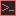
<style>
.page{position:relative;width:16px;height:16px;background:#222629}
.page>*{position:absolute;margin:0}
.t1{font:11.4px "Verdana-Bold";color:#fe605f}
</style>
<div class="page">
<p class="t1" style="left:2px;top:4px;width:7px;height:7px">&gt;</p>
</div>
